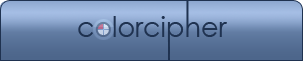
<style>
.page{position:relative;width:303px;height:61px}
.page>*{position:absolute;margin:0}
.t1{font:28.4px "CenturyGothic";color:#1f3250;scale:0.95 1}
</style>
<div class="page">
<p class="t1" style="left:78px;top:16px;width:149px;height:26px">colorcipher</p>
</div>
